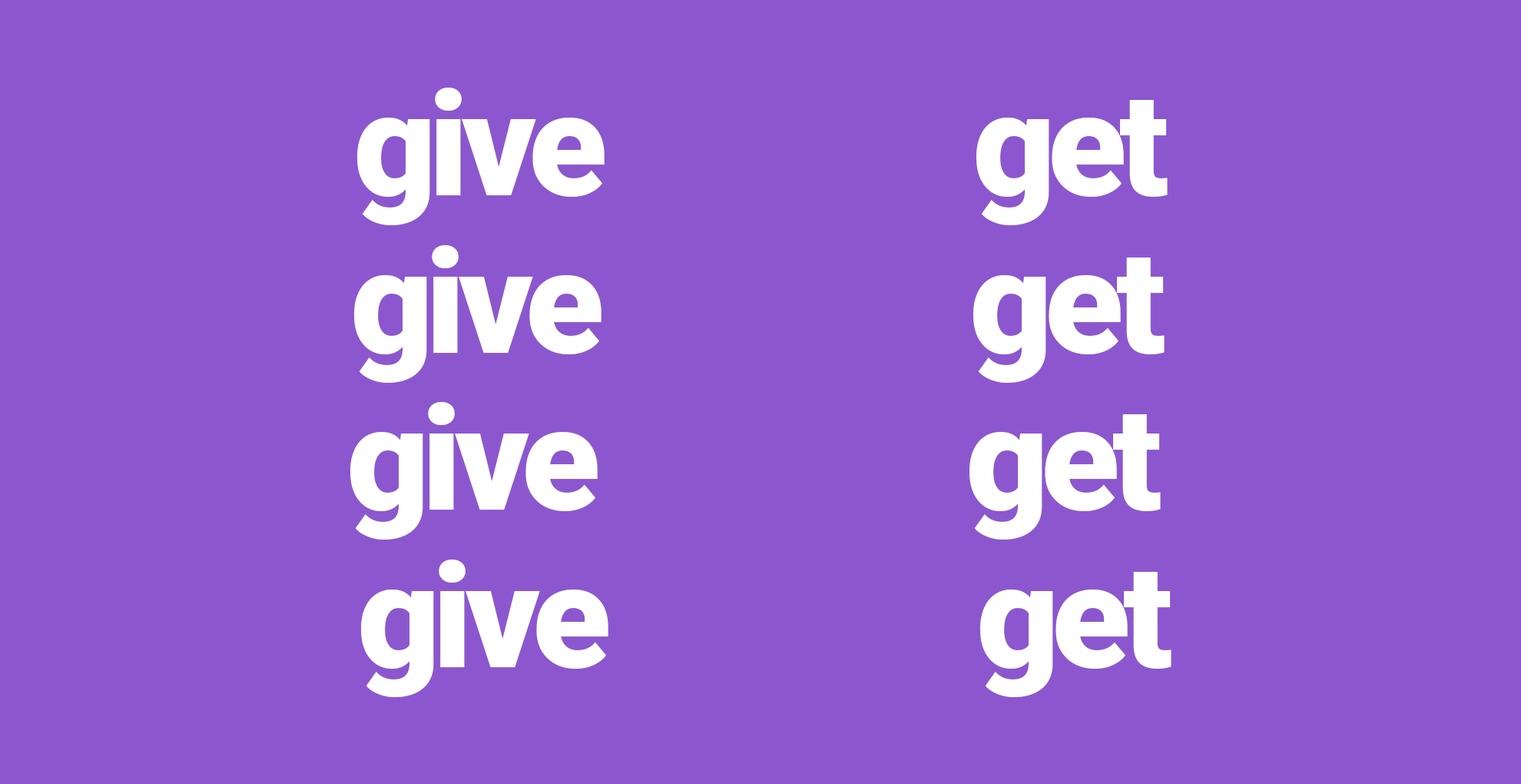
<style>
.page{position:relative;width:1521px;height:784px;background:#8c57ce}
.page>*{position:absolute;margin:0}
.t1{font:144.1px "Roboto-Black";letter-spacing:-0.05em;color:#ffffff}
</style>
<div class="page">
<p class="t1" style="left:357px;top:88px;width:811px;height:137px">give             get</p>
<p class="t1" style="left:354px;top:245px;width:811px;height:138px">give             get</p>
<p class="t1" style="left:350px;top:402px;width:811px;height:137px">give             get</p>
<p class="t1" style="left:361px;top:559px;width:811px;height:138px">give             get</p>
</div>
